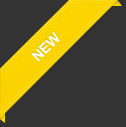
<style>
.page{position:relative;width:126px;height:127px;background:#333333}
.page>*{position:absolute;margin:0}
.t1{font:14px "Arial-BoldMT";color:#ffffff;text-transform:uppercase}
</style>
<div class="page">
<p class="t1" style="left:31px;top:31px;width:29px;height:31px;rotate:-45deg">NEW</p>
</div>
